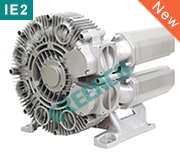
<style>
.page{position:relative;width:180px;height:160px;background:#ffffff}
.page>*{position:absolute;margin:0}
.t1{font:13.9px "Arial-BoldMT";letter-spacing:0.1em;color:#ffffff}
.t2{font:13.9px "ArialMT";letter-spacing:0.1em;color:#ffffff}
</style>
<div class="page">
<p class="t1" style="left:5px;top:4px;width:22px;height:11px">IE2</p>
<p class="t2" style="left:152px;top:1px;width:27px;height:26px;rotate:43deg">New</p>
</div>
